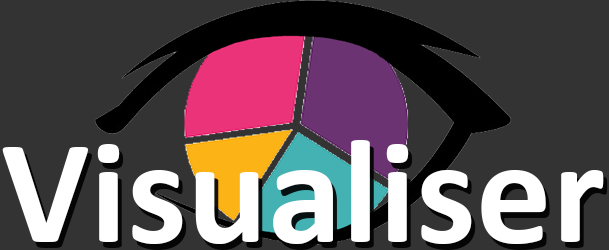
<style>
.page{position:relative;width:609px;height:250px;background:#333333}
.page>*{position:absolute;margin:0}
.t1{font:150.5px "Calibri-Bold";color:#ffffff}
</style>
<div class="page">
<p class="t1" style="left:2px;top:140px;width:602px;height:104px">Visualiser</p>
</div>
